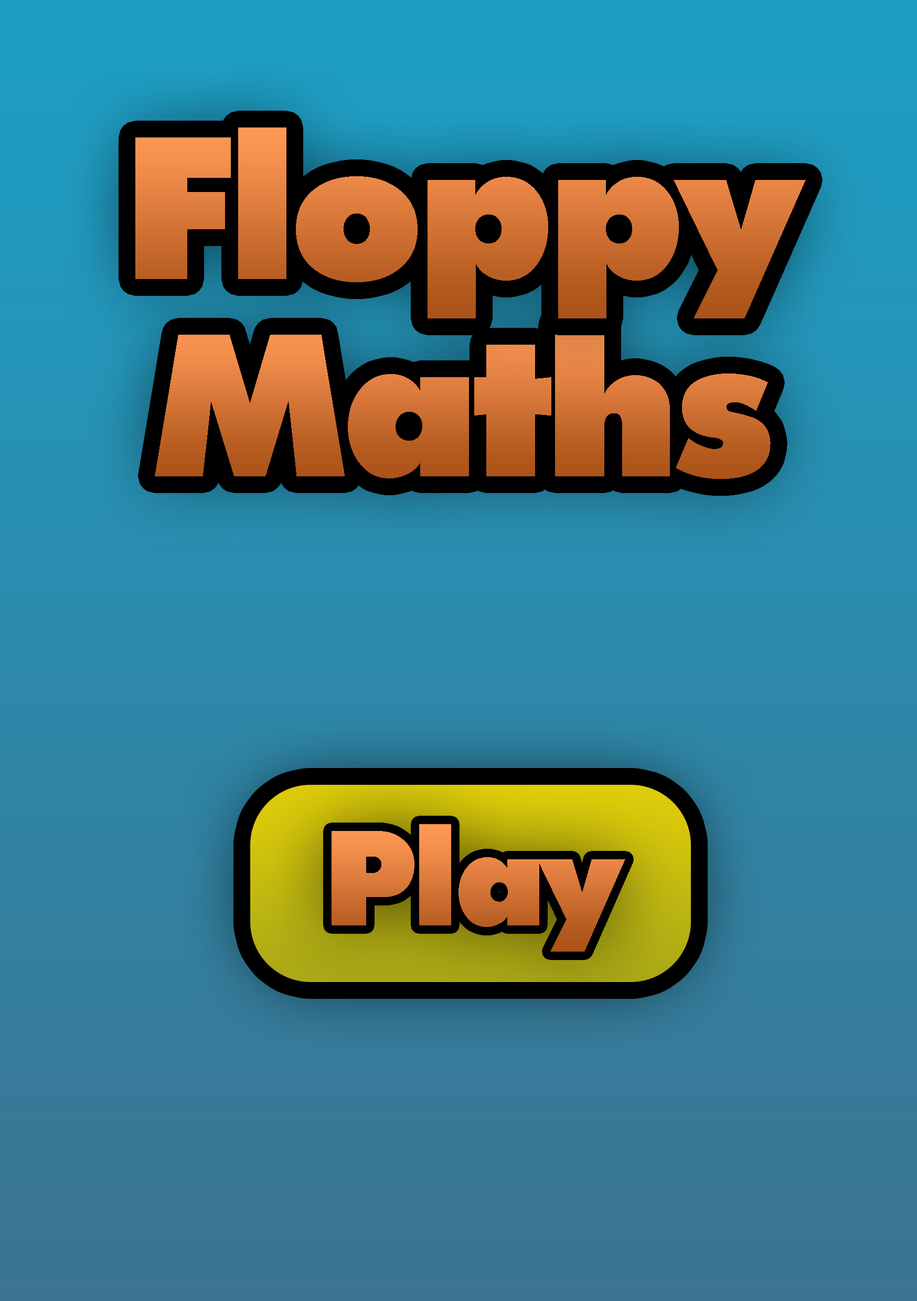
<style>
.page{position:relative;width:917px;height:1301px}
.page>*{position:absolute;margin:0}
.t1{font:202.4px "IntrepidExtraBold"}
.t2{font:134.9px "IntrepidExtraBold"}
</style>
<div class="page">
<p class="t1" style="left:135px;top:127px;width:671px;height:191px">Floppy</p>
<p class="t1" style="left:155px;top:325px;width:615px;height:154px">Maths</p>
<p class="t2" style="left:331px;top:824px;width:294px;height:127px">Play</p>
</div>
